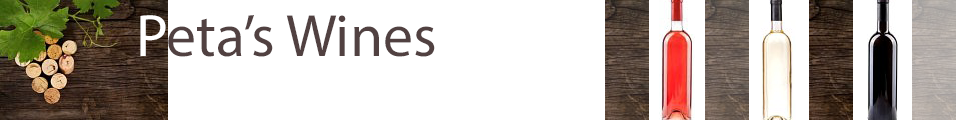
<style>
.page{position:relative;width:956px;height:120px;background:#ffffff}
.page>*{position:absolute;margin:0}
.t1{font:60px "MyriadPro-Regular";color:#514141}
.t2{font:60px "MyriadPro-Regular";color:#ffffff}
</style>
<div class="page">
<p class="t1" style="left:140px;top:15px;width:295px;height:42px"><span class="t2">P</span>eta’s Wines</p>
</div>
